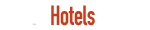
<style>
.page{position:relative;width:150px;height:30px;background:#ffffff}
.page>*{position:absolute;margin:0}
.t1{font:27.5px "DINCondensed-Bold";color:#cc3a1a;scale:0.87 1}
</style>
<div class="page">
<p class="t1" style="left:51px;top:5px;width:44px;height:21px">Hotels</p>
</div>
